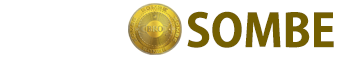
<style>
.page{position:relative;width:340px;height:60px;background:#ffffff}
.page>*{position:absolute;margin:0}
.t1{font:45px "AdobeGothicStd-Bold";letter-spacing:-0.025em;color:#745f01;font-weight:bold}
</style>
<div class="page">
<p class="t1" style="left:187px;top:11px;width:147px;height:37px">SOMBE</p>
</div>
